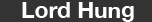
<style>
.page{position:relative;width:152px;height:22px;background:#333333}
.page>*{position:absolute;margin:0}
.t1{font:22.2px "HelveticaNeue-Bold";color:#ffffff}
</style>
<div class="page">
<p class="t1" style="left:22px;top:2px;width:112px;height:20px">Lord Hung</p>
</div>
